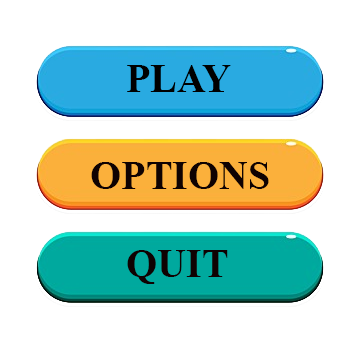
<style>
.page{position:relative;width:360px;height:360px;background:#ffffff}
.page>*{position:absolute;margin:0}
.t1{font:40px "TimesNewRomanPS-BoldMT";color:#000000}
.t2{font:40px "TimesNewRomanPS-BoldMT";color:#0f0202}
</style>
<div class="page">
<p class="t1" style="left:127px;top:65px;width:104px;height:27px">PLAY</p>
<p class="t2" style="left:91px;top:162px;width:178px;height:27px">OPTIONS</p>
<p class="t2" style="left:127px;top:250px;width:101px;height:34px">QUIT</p>
</div>
